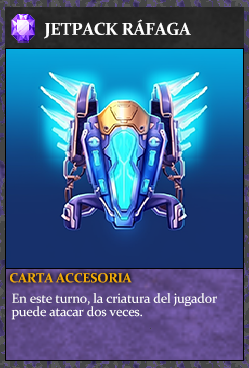
<style>
.page{position:relative;width:249px;height:368px}
.page>*{position:absolute;margin:0}
.t1{font:17.3px "Constantia-Bold";letter-spacing:-0.02em;color:#ffffff}
.t2{font:13.3px "Constantia-Bold";letter-spacing:-0.02em;color:#f2ac05}
.t3{font:13.3px/13.3px "Constantia";letter-spacing:-0.02em;color:#ffffff}
</style>
<div class="page">
<p class="t1" style="left:44px;top:19px;width:147px;height:20px">JETPACK RÁFAGA</p>
<p class="t2" style="left:10px;top:273px;width:122px;height:10px">CARTA ACCESORIA</p>
<p class="t3" style="left:11px;top:293px;width:206px;height:27px">En este turno, la criatura del jugador <br>puede atacar dos veces.</p>
</div>
